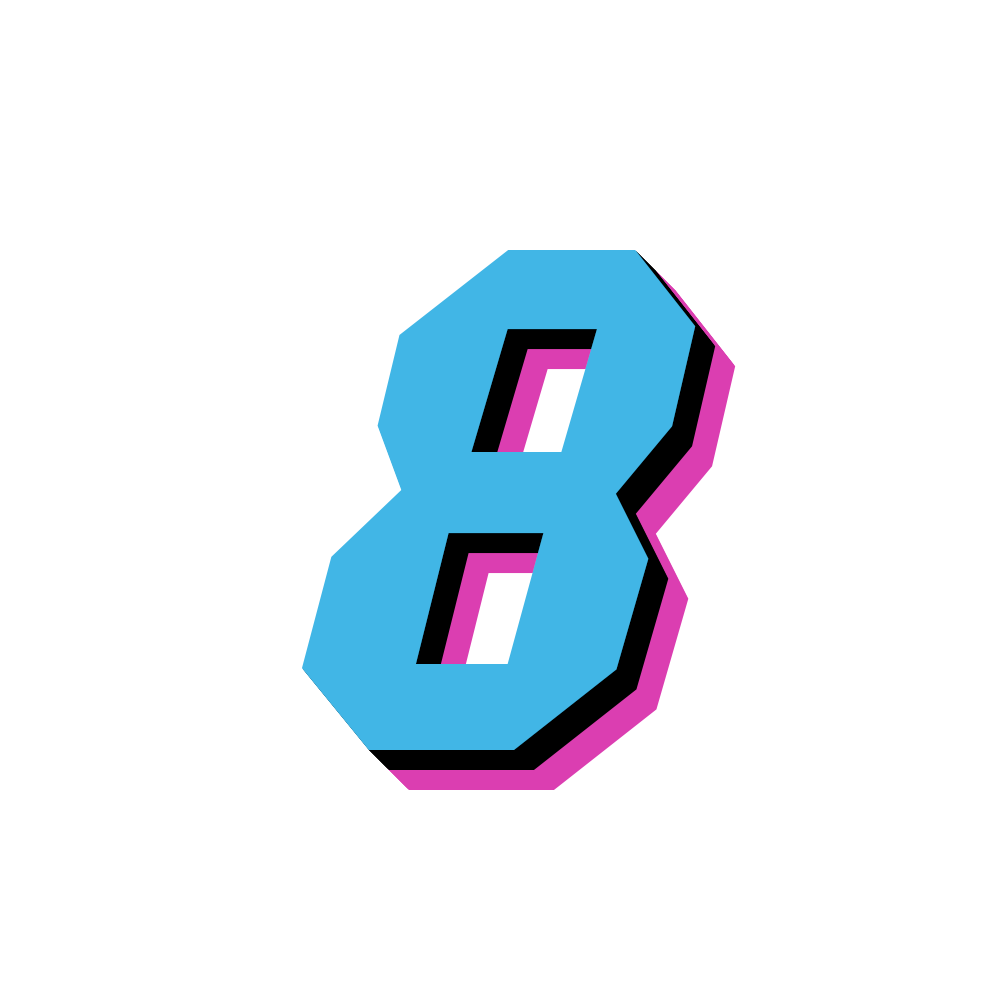
<style>
.page{position:relative;width:1000px;height:1000px;background:#ffffff}
.page>*{position:absolute;margin:0}
.t1{font:625px "NBAHeat";color:#41b6e6}
</style>
<div class="page">
<p class="t1" style="left:302px;top:250px;width:394px;height:500px">8</p>
</div>
